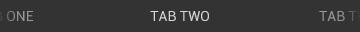
<style>
.page{position:relative;width:360px;height:32px;background:#333333}
.page>*{position:absolute;margin:0}
.t1{font:14px "Roboto-Regular";color:#939393}
.t2{font:14px "Roboto-Regular";color:#d6d6d6}
.t3{font:14px "Roboto-Regular"}
</style>
<div class="page">
<p class="t1" style="left:0px;top:11px;width:33px;height:10px">TAB ONE</p>
<p class="t2" style="left:150px;top:11px;width:59px;height:10px">TAB TWO</p>
<p class="t3" style="left:319px;top:11px;width:41px;height:10px">TAB THREE</p>
</div>
